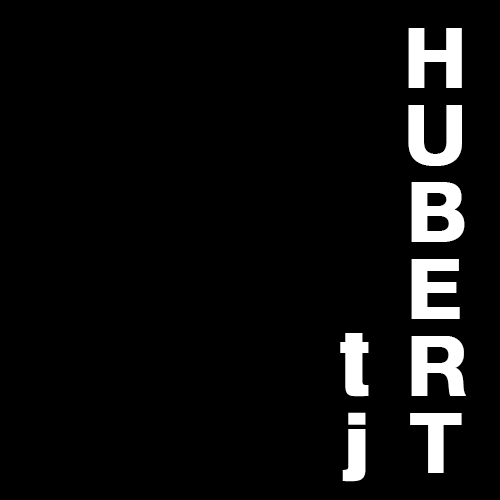
<style>
.page{position:relative;width:500px;height:500px;background:#000000}
.page>*{position:absolute;margin:0}
.t1{font:83px/77px "HelveticaNeue-Bold";color:#ffffff;font-weight:bold}
</style>
<div class="page">
<p class="t1" style="left:408px;top:28px;width:58px;height:445px;text-align:center">H<br>U<br>B<br>E<br>R<br>T</p>
</div>
